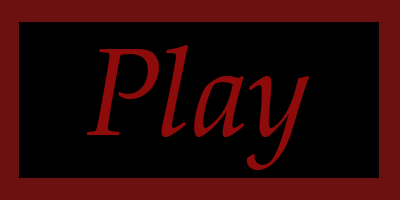
<style>
.page{position:relative;width:400px;height:200px;background:#000000}
.page>*{position:absolute;margin:0}
.t1{font:125px "PalatinoLinotype-Italic";color:#8d0b0b}
</style>
<div class="page">
<p class="t1" style="left:87px;top:45px;width:223px;height:125px">Play</p>
</div>
